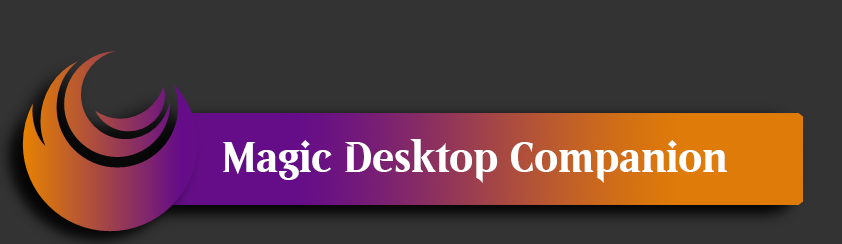
<style>
.page{position:relative;width:842px;height:244px;background:#333333}
.page>*{position:absolute;margin:0}
.t1{font:42.7px "Beleren-Bold";color:#ffffff}
</style>
<div class="page">
<p class="t1" style="left:223px;top:139px;width:504px;height:44px">Magic Desktop Companion</p>
</div>
